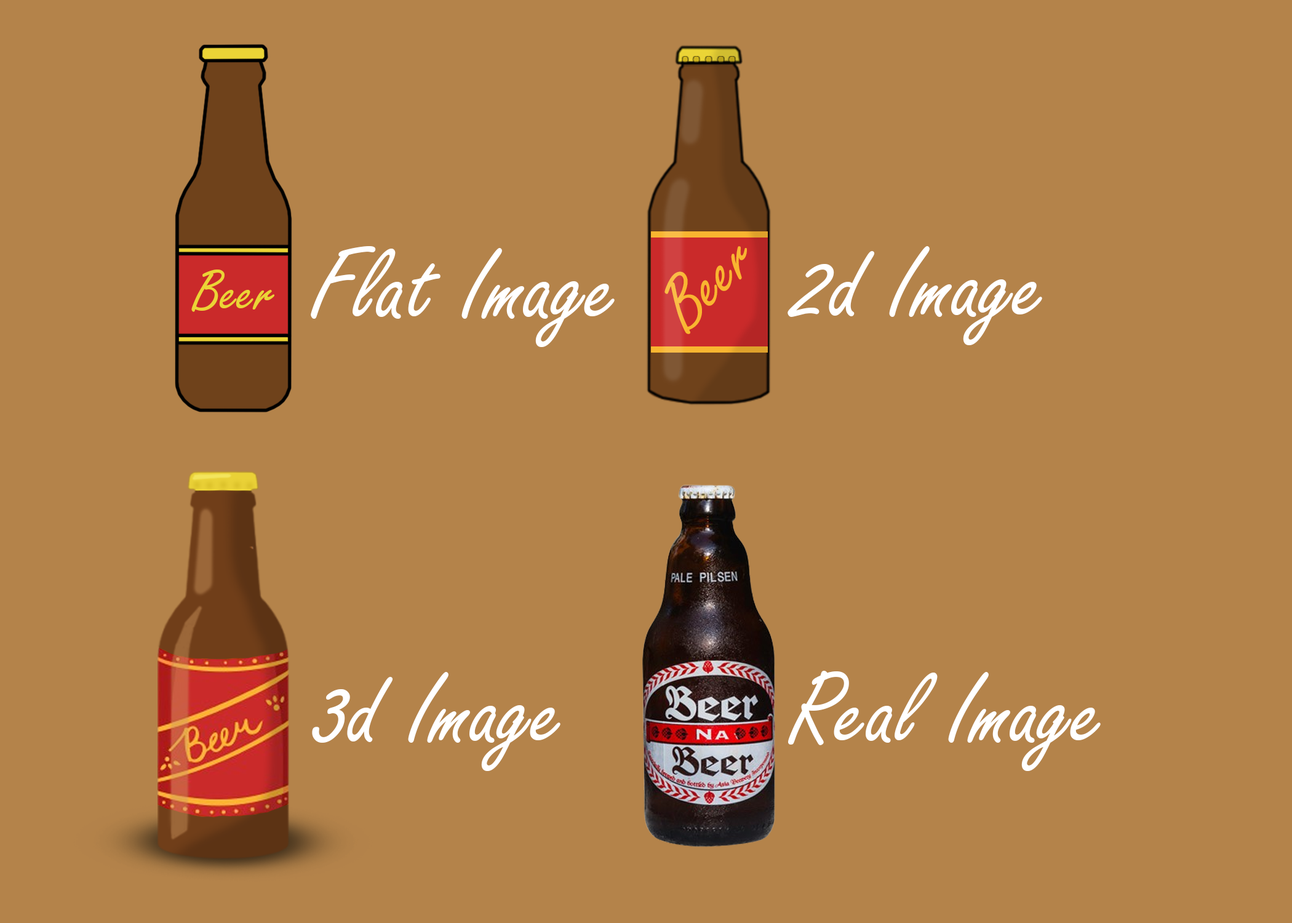
<style>
.page{position:relative;width:1292px;height:923px;background:#b4834a}
.page>*{position:absolute;margin:0}
.t1{font:110.4px "FreestyleScript-Regular";color:#ffffff}
.t2{font:77.3px "FreestyleScript-Regular";color:#f9b530}
.t3{font:62.3px "FreestyleScript-Regular";color:#ebd436}
</style>
<div class="page">
<p class="t1" style="left:311px;top:246px;width:304px;height:101px">Flat Image</p>
<p class="t2" style="left:664px;top:246px;width:83px;height:88px;rotate:-45deg">Beer</p>
<p class="t1" style="left:788px;top:246px;width:254px;height:99px">2d Image</p>
<p class="t3" style="left:191px;top:269px;width:83px;height:43px">Beer</p>
<p class="t1" style="left:312px;top:672px;width:249px;height:99px">3d Image</p>
<p class="t1" style="left:788px;top:671px;width:313px;height:100px">Real Image</p>
</div>
